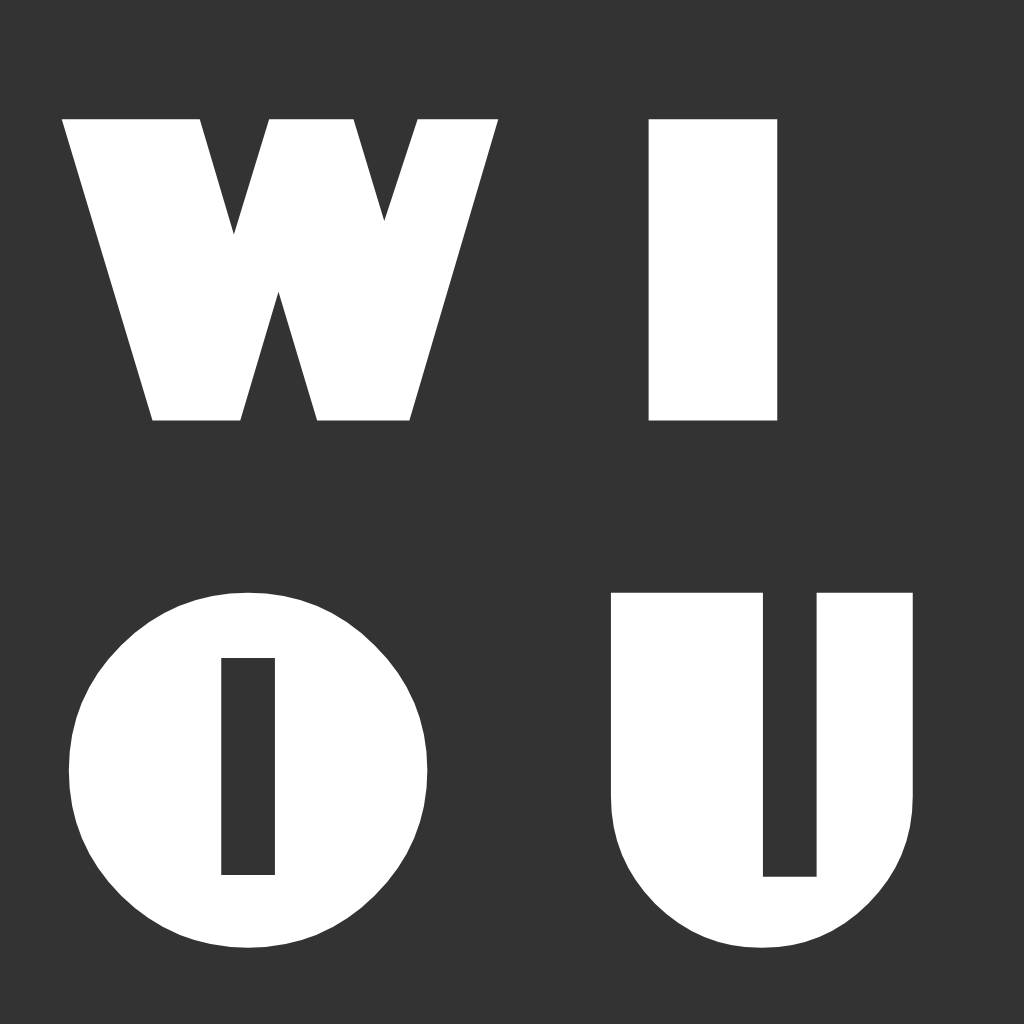
<style>
.page{position:relative;width:1024px;height:1024px;background:#333333}
.page>*{position:absolute;margin:0}
.t1{font:375px "DayPosterBlack";color:#ffffff}
.t2{font:433px "DayPosterBlack";color:#ffffff}
</style>
<div class="page">
<p class="t1" style="left:61px;top:119px;width:852px;height:829px">W I<br><span class="t2">O U</span></p>
</div>
